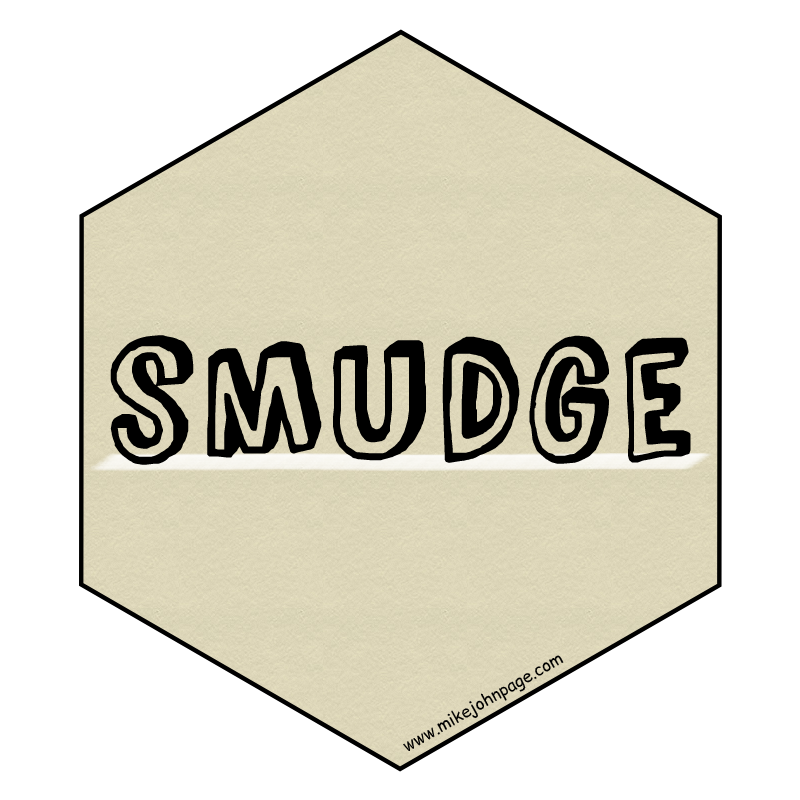
<style>
.page{position:relative;width:800px;height:800px;background:#ffffff}
.page>*{position:absolute;margin:0}
.t1{font:200px "ComicZineOT";color:#000000}
.t2{font:17px "ComicRelief";color:#000000}
</style>
<div class="page">
<p class="t1" style="left:110px;top:335px;width:581px;height:130px">smudge</p>
<p class="t2" style="left:402px;top:654px;width:162px;height:98px;rotate:-30deg">www.mikejohnpage.com</p>
</div>
